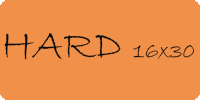
<style>
.page{position:relative;width:200px;height:100px;background:#f19149}
.page>*{position:absolute;margin:0}
.t1{font:23.3px "BradleyHandITC";color:#0a0b0c}
.t2{font:43.3px "BradleyHandITC";color:#0a0b0c}
</style>
<div class="page">
<p class="t1" style="left:4px;top:33px;width:190px;height:27px"><span class="t2">HARD </span>16x30</p>
</div>
